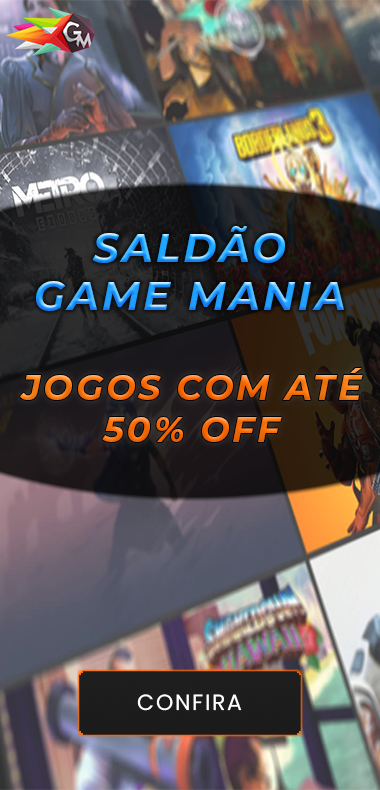
<style>
.page{position:relative;width:380px;height:790px}
.page>*{position:absolute;margin:0}
.t1{font:40px "Montserrat-BoldItalic";letter-spacing:0.08em;text-transform:uppercase}
.t2{font:35px "Montserrat-BoldItalic";letter-spacing:0.08em;text-transform:uppercase}
.t3{font:22px "Poppins-Regular";letter-spacing:0.08em;color:#ffffff;text-transform:uppercase}
</style>
<div class="page">
<p class="t1" style="left:36px;top:226px;width:308px;height:85px;text-align:center">SALDÃO<br>GAME MANIA</p>
<p class="t2" style="left:20px;top:368px;width:343px;height:74px;text-align:center">JOGOS COM ATé<br>50% OFF</p>
<p class="t3" style="left:137px;top:694px;width:105px;height:17px">CONFIRA</p>
</div>
